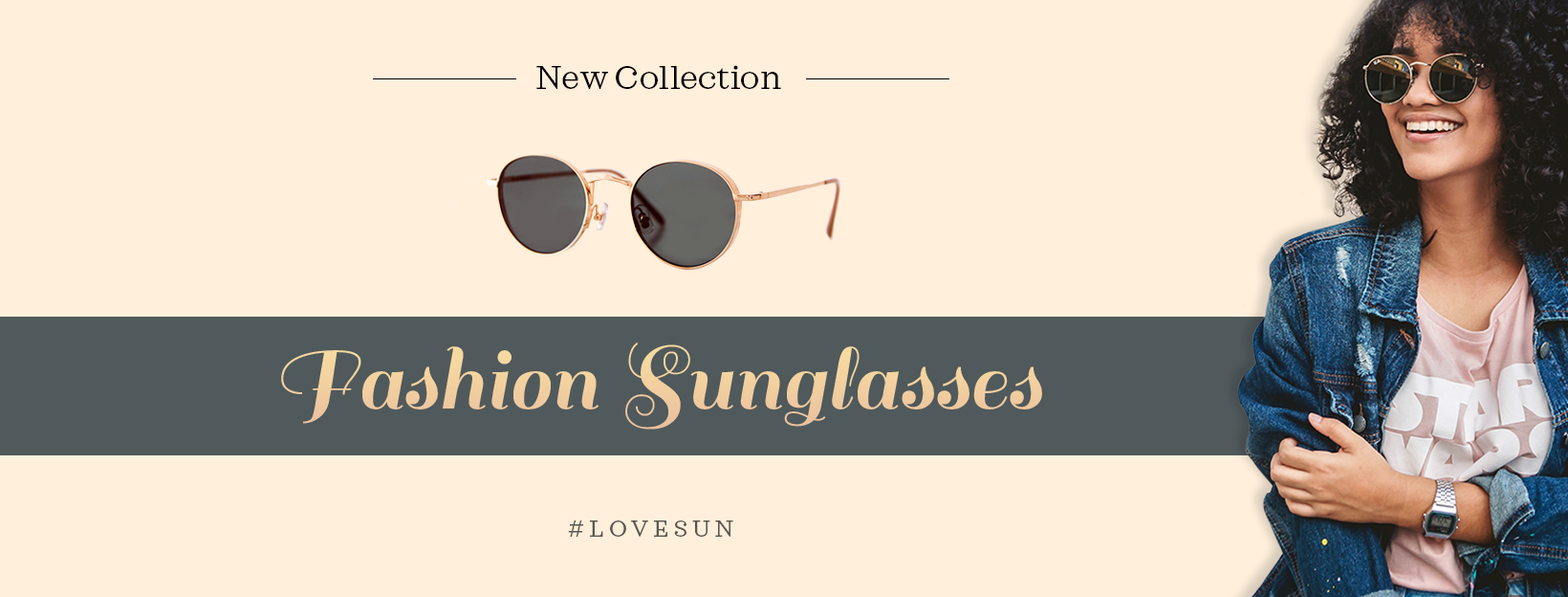
<style>
.page{position:relative;width:1568px;height:597px;background:#ffefdb}
.page>*{position:absolute;margin:0}
.t1{font:33.5px "Sagona-BookDEMO";color:#000000}
.t2{font:95.6px "Sail-Regular";color:#f1ce9f}
.t3{font:23.9px "Sagona-BookDEMO";letter-spacing:0.2em;color:#575750}
.t4{font:23.9px "Raleway-Regular";letter-spacing:0.2em;color:#575750}
</style>
<div class="page">
<p class="t1" style="left:536px;top:65px;width:245px;height:24px">New Collection</p>
<p class="t2" style="left:281px;top:342px;width:761px;height:87px">Fashion Sunglasses</p>
<p class="t3" style="left:568px;top:520px;width:165px;height:16px"><span class="t4">#</span>LOVESUN</p>
</div>
